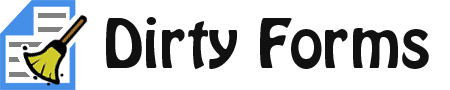
<style>
.page{position:relative;width:450px;height:90px;background:#ffffff}
.page>*{position:absolute;margin:0}
.t1{font:60px "HoboStd";color:#111111}
</style>
<div class="page">
<p class="t1" style="left:106px;top:17px;width:323px;height:52px">Dirty Forms</p>
</div>
